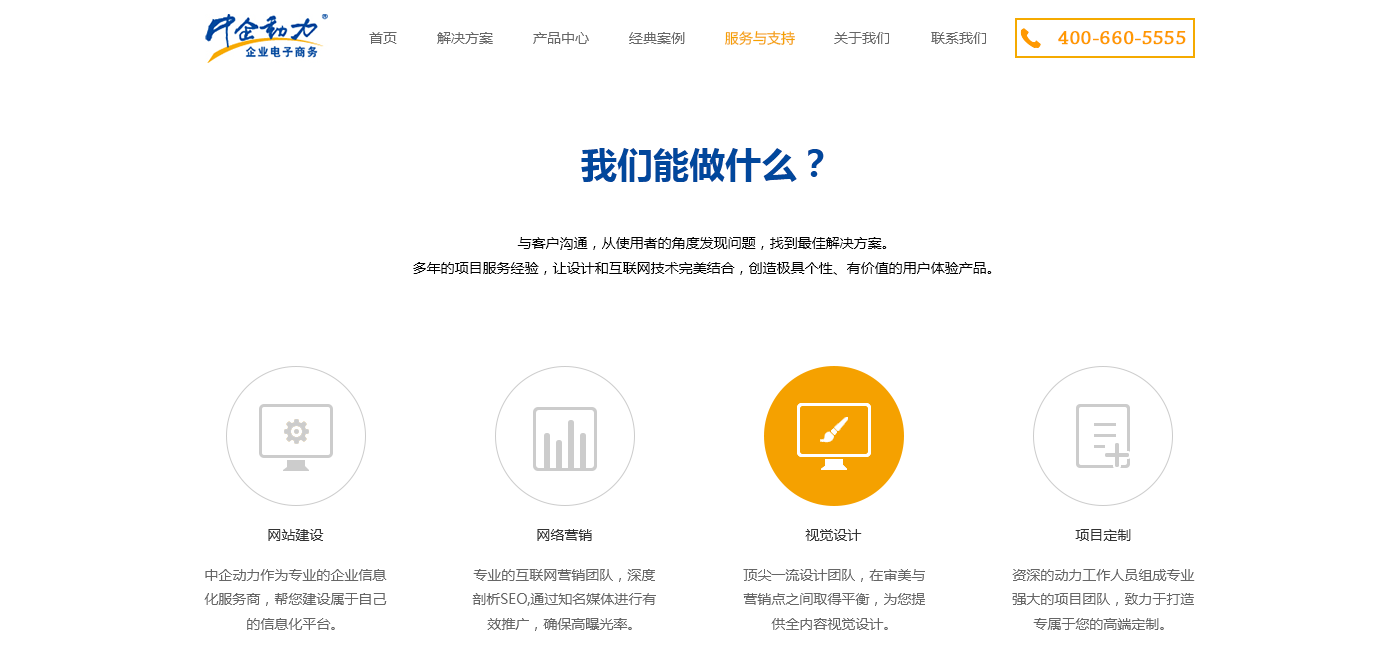
<style>
.page{position:relative;width:1400px;height:670px;background:#ffffff}
.page>*{position:absolute;margin:0}
.t1{font:14px "MicrosoftYaHei";color:#666666}
.t2{font:14px "MicrosoftYaHei";color:#f5a100}
.t3{font:20px "ChaparralPro-Regular";color:#ff9900;font-weight:bold}
.t4{font:36px "MicrosoftYaHei-Bold";color:#01479c}
.t5{font:14px "MicrosoftYaHei";color:#000000}
.t6{font:14px "MicrosoftYaHei";color:#333333}
</style>
<div class="page">
<p class="t1" style="left:369px;top:32px;width:28px;height:12px">首页</p>
<p class="t1" style="left:437px;top:32px;width:56px;height:12px">解决方案</p>
<p class="t1" style="left:533px;top:32px;width:56px;height:12px">产品中心</p>
<p class="t1" style="left:629px;top:32px;width:56px;height:12px">经典案例</p>
<p class="t2" style="left:725px;top:31px;width:70px;height:14px">服务与支持</p>
<p class="t1" style="left:834px;top:32px;width:55px;height:12px">关于我们</p>
<p class="t1" style="left:931px;top:32px;width:55px;height:12px">联系我们</p>
<p class="t3" style="left:1058px;top:31px;width:128px;height:14px">400-660-5555</p>
<p class="t4" style="left:581px;top:148px;width:243px;height:34px">我们能做什么？</p>
<p class="t5" style="left:413px;top:237px;width:579px;height:38px;text-align:center">与客户沟通，从使用者的角度发现问题，找到最佳解决方案。<br>多年的项目服务经验，让设计和互联网技术完美结合，创造极具个性、有价值的用户体验产品。</p>
<p class="t6" style="left:268px;top:529px;width:56px;height:12px">网站建设</p>
<p class="t6" style="left:537px;top:529px;width:55px;height:12px">网络营销</p>
<p class="t6" style="left:805px;top:529px;width:57px;height:12px">视觉设计</p>
<p class="t6" style="left:1075px;top:529px;width:56px;height:12px">项目定制</p>
<p class="t1" style="left:204px;top:569px;width:183px;height:61px;text-align:center">中企动力作为专业的企业信息<br>化服务商，帮您建设属于自己<br>的信息化平台。</p>
<p class="t1" style="left:472px;top:569px;width:184px;height:62px;text-align:center">专业的互联网营销团队，深度<br>剖析SEO,通过知名媒体进行有<br>效推广，确保高曝光率。</p>
<p class="t1" style="left:743px;top:569px;width:182px;height:61px;text-align:center">顶尖一流设计团队，在审美与<br>营销点之间取得平衡，为您提<br>供全内容视觉设计。</p>
<p class="t1" style="left:1012px;top:569px;width:183px;height:61px;text-align:center">资深的动力工作人员组成专业<br>强大的项目团队，致力于打造<br>专属于您的高端定制。</p>
</div>
